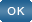
<style>
.page{position:relative;width:32px;height:22px}
.page>*{position:absolute;margin:0}
.t1{font:11px "ArialMT";letter-spacing:0.099em;color:#ffffff}
</style>
<div class="page">
<p class="t1" style="left:7px;top:7px;width:18px;height:8px">OK</p>
</div>
